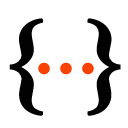
<style>
.page{position:relative;width:128px;height:128px;background:#ffffff}
.page>*{position:absolute;margin:0}
.t1{font:103.7px "STKaiTi-TC-Bold";color:#020202;font-weight:bold}
.t2{font:100.1px "STKaiti-SC-Bold";color:#f84203}
</style>
<div class="page">
<p class="t1" style="left:9px;top:18px;width:112px;height:98px">{ }</p>
<p class="t2" style="left:38px;top:62px;width:56px;height:13px">...</p>
</div>
